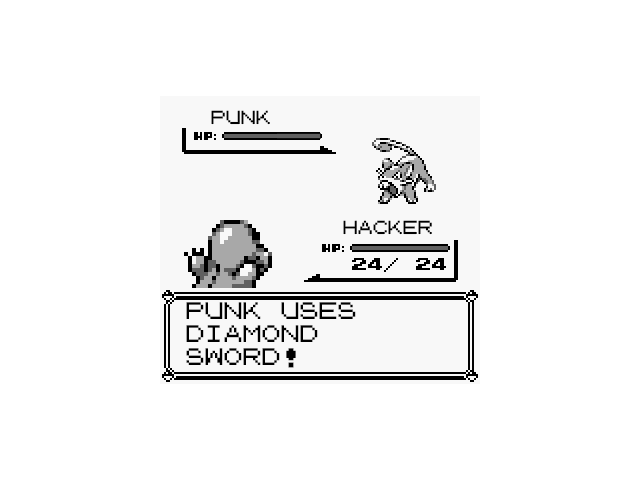
<style>
.page{position:relative;width:640px;height:480px;background:#ffffff}
.page>*{position:absolute;margin:0}
.t1{font:15px "PokemonGB";color:#000000}
.t2{font:19px "PokemonGB";color:#000000}
</style>
<div class="page">
<p class="t1" style="left:211px;top:110px;width:59px;height:15px">PUNK</p>
<p class="t1" style="left:343px;top:220px;width:89px;height:15px">HACKER</p>
<p class="t2" style="left:186px;top:302px;width:170px;height:66px">PUNK USES DIAMOND SWORD!</p>
</div>
